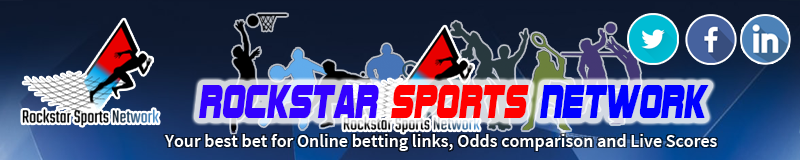
<style>
.page{position:relative;width:800px;height:160px}
.page>*{position:absolute;margin:0}
.t1{font:48px "SFSportsNightNS";color:#3300ff;scale:0.71 1}
.t2{font:48px "SFSportsNightNS";color:#ff0000;scale:0.71 1}
.t3{font:48px "SFSportsNightNS";color:#0000ff;scale:0.71 1}
.t4{font:18px "SourceSansPro-Semibold";color:#ffffff}
</style>
<div class="page">
<p class="t1" style="left:199px;top:85px;width:510px;height:33px">RockStar<span class="t2"> Sports </span><span class="t3">network</span></p>
<p class="t4" style="left:164px;top:134px;width:553px;height:17px">Your best bet for Online betting links, Odds comparison and Live Scores</p>
</div>
